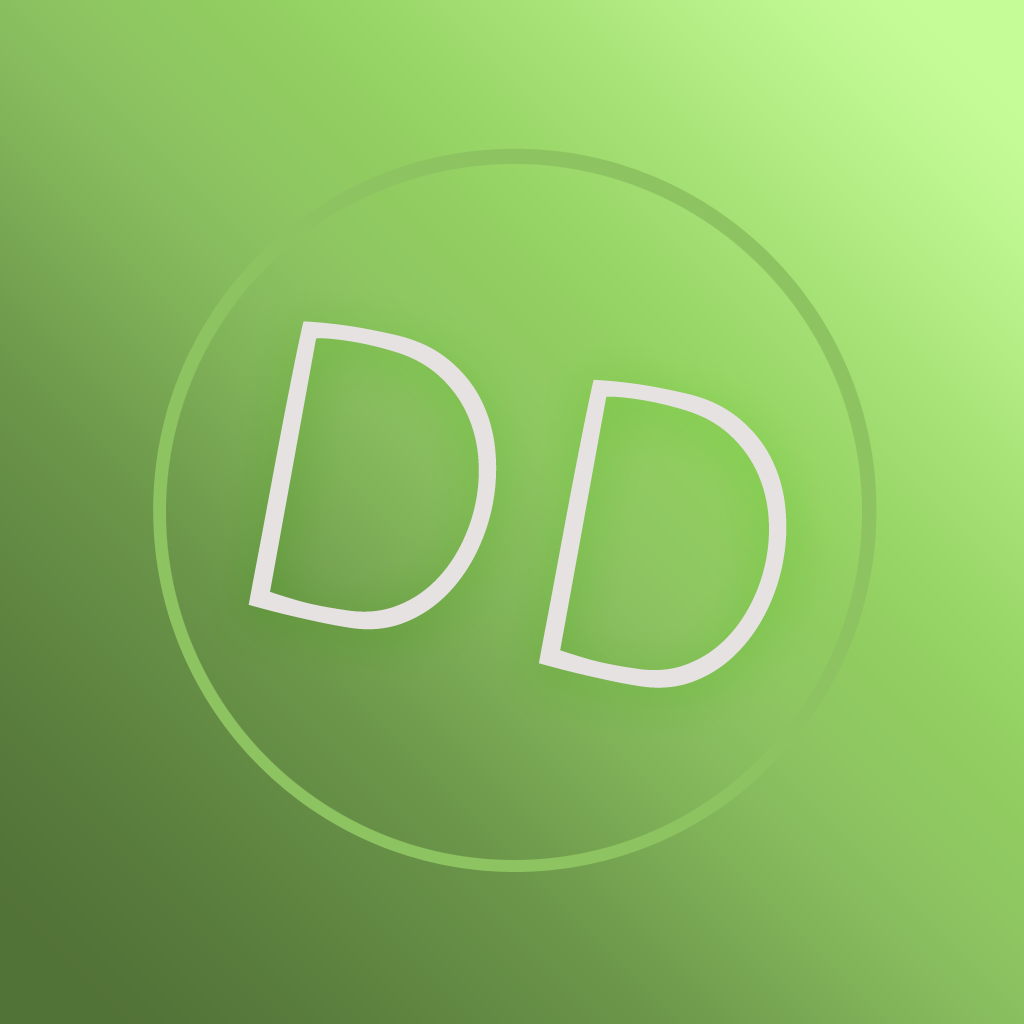
<style>
.page{position:relative;width:1024px;height:1024px}
.page>*{position:absolute;margin:0}
.t1{font:400px "cafbrewery";letter-spacing:0.14em;color:#e6e2e2}
</style>
<div class="page">
<p class="t1" style="left:248px;top:321px;width:539px;height:367px;rotate:11deg">DD</p>
</div>
